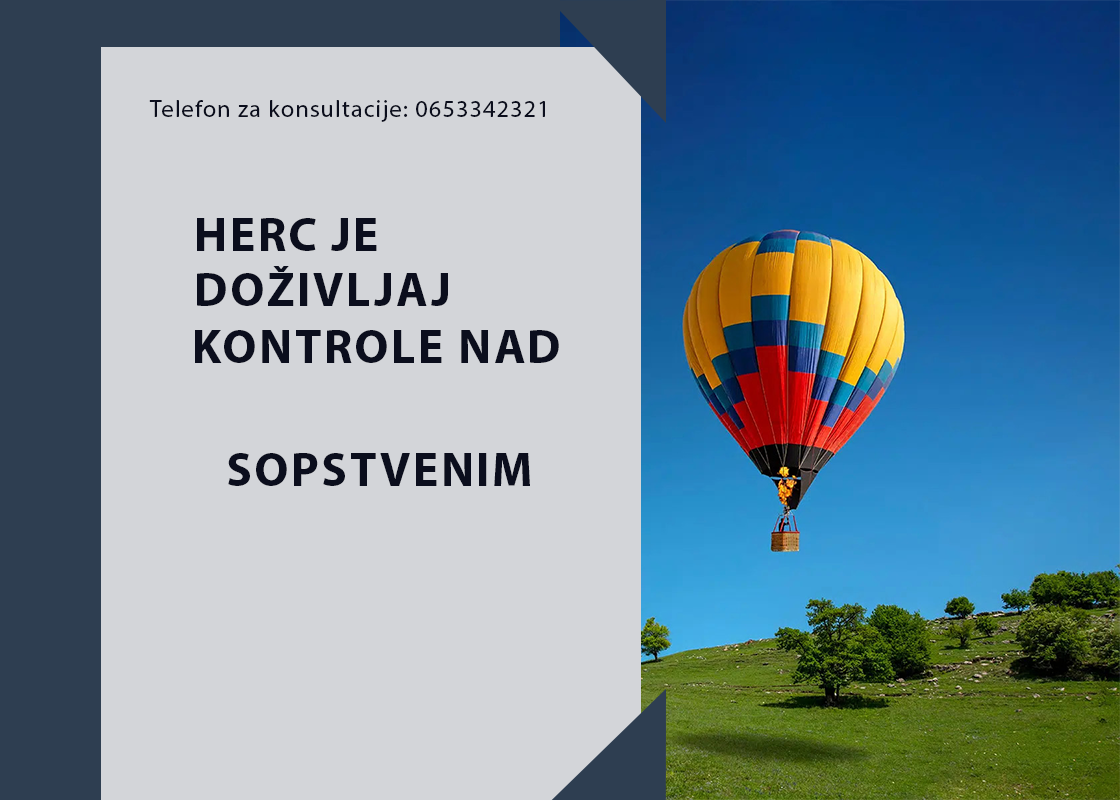
<style>
.page{position:relative;width:1120px;height:800px;background:#d3d5d9}
.page>*{position:absolute;margin:0}
.t1{font:24px "MyriadPro-Regular";letter-spacing:0.05em;color:#0b0e1d}
.t2{font:48px "MyriadPro-Bold";letter-spacing:0.05em;color:#0b0e1d}
</style>
<div class="page">
<p class="t1" style="left:149px;top:100px;width:396px;height:22px">Telefon za konsultacije: 0653342321</p>
<p class="t2" style="left:197px;top:218px;width:180px;height:33px">HERC JE</p>
<p class="t2" style="left:197px;top:266px;width:251px;height:40px">DOŽIVLJAJ</p>
<p class="t2" style="left:195px;top:330px;width:364px;height:33px">KONTROLE NAD</p>
<p class="t2" style="left:228px;top:453px;width:302px;height:33px">SOPSTVENIM</p>
</div>
